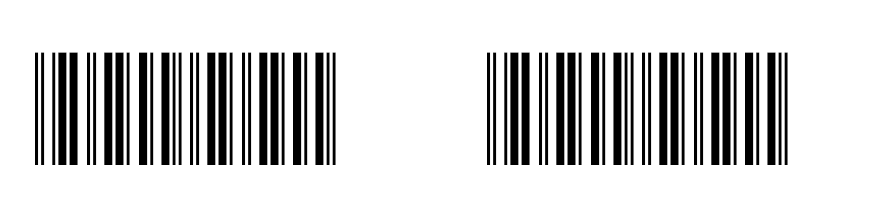
<style>
.page{position:relative;width:874px;height:224px;background:#ffffff}
.page>*{position:absolute;margin:0}
.t1{font:150px "Free3of9";letter-spacing:0.05em;color:#000000;scale:0.8 1}
</style>
<div class="page">
<p class="t1" style="left:35px;top:52px;width:301px;height:113px">705005</p>
<p class="t1" style="left:487px;top:52px;width:301px;height:113px">705005</p>
</div>
